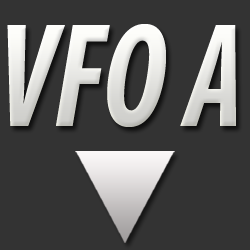
<style>
.page{position:relative;width:250px;height:250px;background:#333333}
.page>*{position:absolute;margin:0}
.t1{font:150px "MyriadPro-BoldCondIt";scale:0.87 1}
</style>
<div class="page">
<p class="t1" style="left:7px;top:24px;width:229px;height:103px">VFO A</p>
</div>
